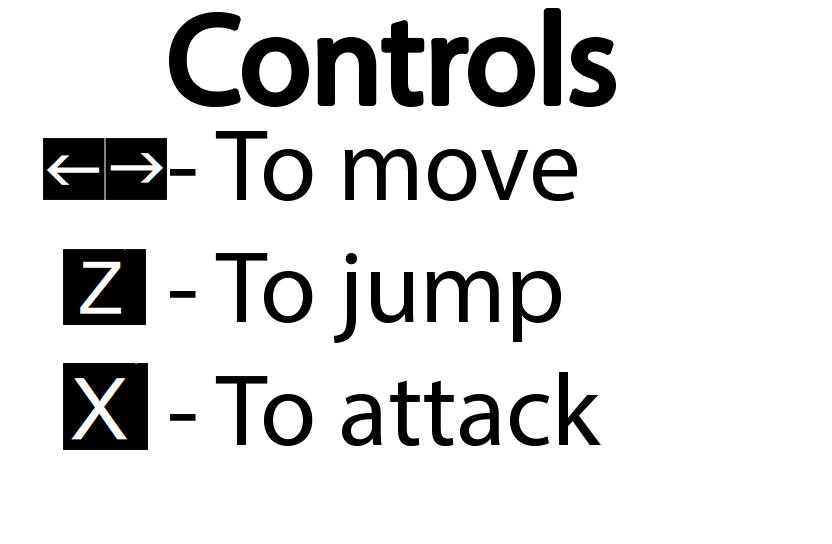
<style>
.page{position:relative;width:832px;height:544px;background:#ffffff}
.page>*{position:absolute;margin:0}
.t1{font:129px "MyriadPro-Regular";color:#000000}
.t2{font:103px "MyriadPro-Regular";color:#000000}
</style>
<div class="page">
<p class="t1" style="left:172px;top:11px;width:441px;height:94px">Controls</p>
<p class="t2" style="left:170px;top:131px;width:407px;height:71px">- To move</p>
<p class="t2" style="left:170px;top:253px;width:391px;height:90px">- To jump</p>
<p class="t2" style="left:170px;top:372px;width:431px;height:75px">- To attack</p>
</div>
